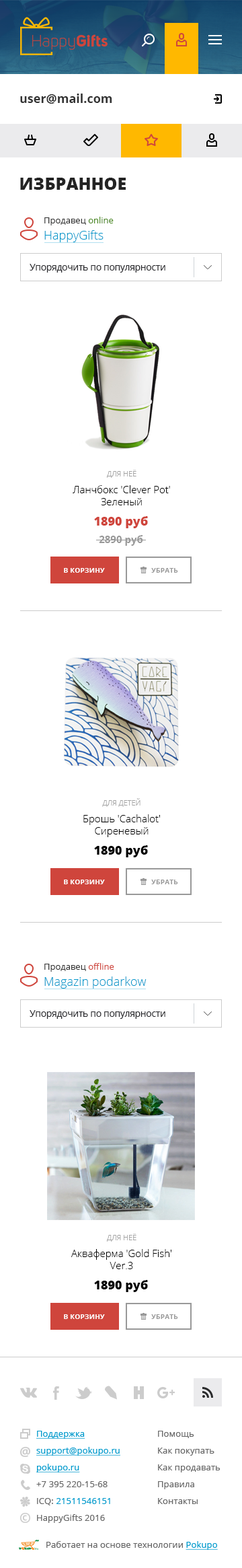
<style>
.page{position:relative;width:242px;height:1568px;background:#ffffff}
.page>*{position:absolute;margin:0}
.t1{font:12.1px "OpenSans-Bold";color:#333333}
.t2{font:16.8px "OpenSans-Extrabold";color:#232323;text-transform:uppercase}
.t3{font:8.7px "OpenSans";color:#333333}
.t4{font:8.7px "OpenSans";color:#4f8b27}
.t5{font:12.1px "OpenSans-Light";color:#0099cc}
.t6{font:9.4px "OpenSans";letter-spacing:-0.025em;color:#28282c}
.t7{font:7.4px "OpenSans-Light";color:#a3a3a3;text-transform:uppercase}
.t8{font:10.1px/12.1px "OpenSans-Light";color:#000000}
.t9{font:12.1px/17.5px "OpenSans-Extrabold";color:#cf453c}
.t10{font:10.1px/17.5px "OpenSans-Bold";color:#999999}
.t11{font:6.7px "OpenSans-Bold";letter-spacing:0.025em;color:#ffffff;text-transform:uppercase}
.t12{font:6.7px "OpenSans-Bold";letter-spacing:0.025em;color:#999999;text-transform:uppercase}
.t13{font:12.1px "OpenSans-Extrabold";color:#000000}
.t14{font:8.7px "OpenSans";color:#cf453c}
</style>
<div class="page">
<p class="t1" style="left:20px;top:94px;width:92px;height:10px">user@mail.com</p>
<p class="t2" style="left:20px;top:178px;width:106px;height:12px">Избранное</p>
<p class="t3" style="left:44px;top:217px;width:70px;height:8px">Продавец <span class="t4">online</span></p>
<p class="t5" style="left:44px;top:230px;width:60px;height:12px">HappyGifts</p>
<p class="t6" style="left:30px;top:264px;width:136px;height:9px">Упорядочить по популярности</p>
<p class="t7" style="left:107px;top:470px;width:30px;height:8px">для неё</p>
<p class="t8" style="left:73px;top:485px;width:97px;height:20px;text-align:center">Ланчбокс 'Clever Pot'<br>Зеленый</p>
<p class="t9" style="left:94px;top:516px;width:54px;height:30px;text-align:center">1890 руб<br><span class="t10">2890 руб</span></p>
<p class="t11" style="left:64px;top:568px;width:41px;height:5px">в корзину</p>
<p class="t12" style="left:151px;top:568px;width:27px;height:5px">Убрать</p>
<p class="t7" style="left:102px;top:798px;width:39px;height:9px">для детей</p>
<p class="t8" style="left:83px;top:814px;width:77px;height:23px;text-align:center">Брошь 'Cachalot'<br>Сиреневый</p>
<p class="t13" style="left:94px;top:845px;width:54px;height:12px">1890 руб</p>
<p class="t11" style="left:64px;top:880px;width:41px;height:4px">в корзину</p>
<p class="t12" style="left:151px;top:880px;width:27px;height:4px">Убрать</p>
<p class="t3" style="left:44px;top:963px;width:70px;height:9px">Продавец <span class="t14">offline</span></p>
<p class="t5" style="left:44px;top:976px;width:103px;height:13px">Magazin podarkow</p>
<p class="t6" style="left:30px;top:1010px;width:136px;height:9px">Упорядочить по популярности</p>
<p class="t7" style="left:107px;top:1234px;width:30px;height:8px">для неё</p>
<p class="t8" style="left:71px;top:1249px;width:101px;height:20px;text-align:center">Акваферма 'Gold Fish'<br>Ver.3</p>
<p class="t13" style="left:94px;top:1280px;width:54px;height:12px">1890 руб</p>
<p class="t11" style="left:64px;top:1314px;width:41px;height:5px">в корзину</p>
<p class="t12" style="left:151px;top:1314px;width:27px;height:5px">Убрать</p>
</div>
